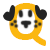
<style>
.page{position:relative;width:50px;height:50px;background:#ffffff}
.page>*{position:absolute;margin:0}
.t1{font:56px "Calibri-Bold";color:#fbb710}
</style>
<div class="page">
<p class="t1" style="left:9px;top:3px;width:37px;height:43px">Q</p>
</div>
